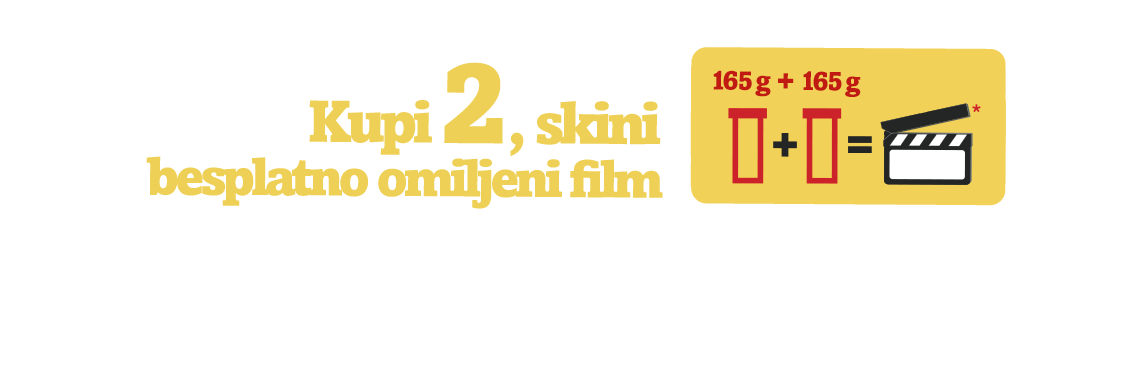
<style>
.page{position:relative;width:1139px;height:390px;background:#ffffff}
.page>*{position:absolute;margin:0}
.t1{font:116.9px "AmasisMTStd-Black";letter-spacing:-0.088em;color:#efd057}
.t2{font:27.3px "AmasisMTStd-Black";letter-spacing:-0.05em;color:#c01a13}
.t3{font:27.3px "AmasisMTStd-Black";letter-spacing:-0.15em;color:#c01a13}
.t4{font:58.9px "AmasisMTStd-Black";letter-spacing:-0.088em;color:#efd057}
.t5{font:52.4px "AmasisMTStd-Black";letter-spacing:-0.088em;color:#efd057}
</style>
<div class="page">
<p class="t1" style="left:444px;top:62px;width:59px;height:82px">2</p>
<p class="t2" style="left:713px;top:70px;width:148px;height:27px"><span class="t3">1</span>65 g + <span class="t3">1</span>65 g</p>
<p class="t4" style="left:309px;top:100px;width:123px;height:55px">Kupi</p>
<p class="t4" style="left:510px;top:101px;width:151px;height:56px">, skini</p>
<p class="t5" style="left:146px;top:156px;width:517px;height:53px">besplatno omiljeni film</p>
</div>
